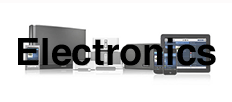
<style>
.page{position:relative;width:232px;height:102px;background:#ffffff}
.page>*{position:absolute;margin:0}
.t1{font:37.5px "Helvetica-Bold";color:#000000}
</style>
<div class="page">
<p class="t1" style="left:18px;top:38px;width:198px;height:28px">Electronics</p>
</div>
